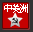
<style>
.page{position:relative;width:33px;height:32px;background:#c50000}
.page>*{position:absolute;margin:0}
.t1{font:10.4px "SimSun";letter-spacing:-0.25em;color:#ffffff}
</style>
<div class="page">
<p class="t1" style="left:4px;top:4px;width:24px;height:9px">中美洲</p>
</div>
